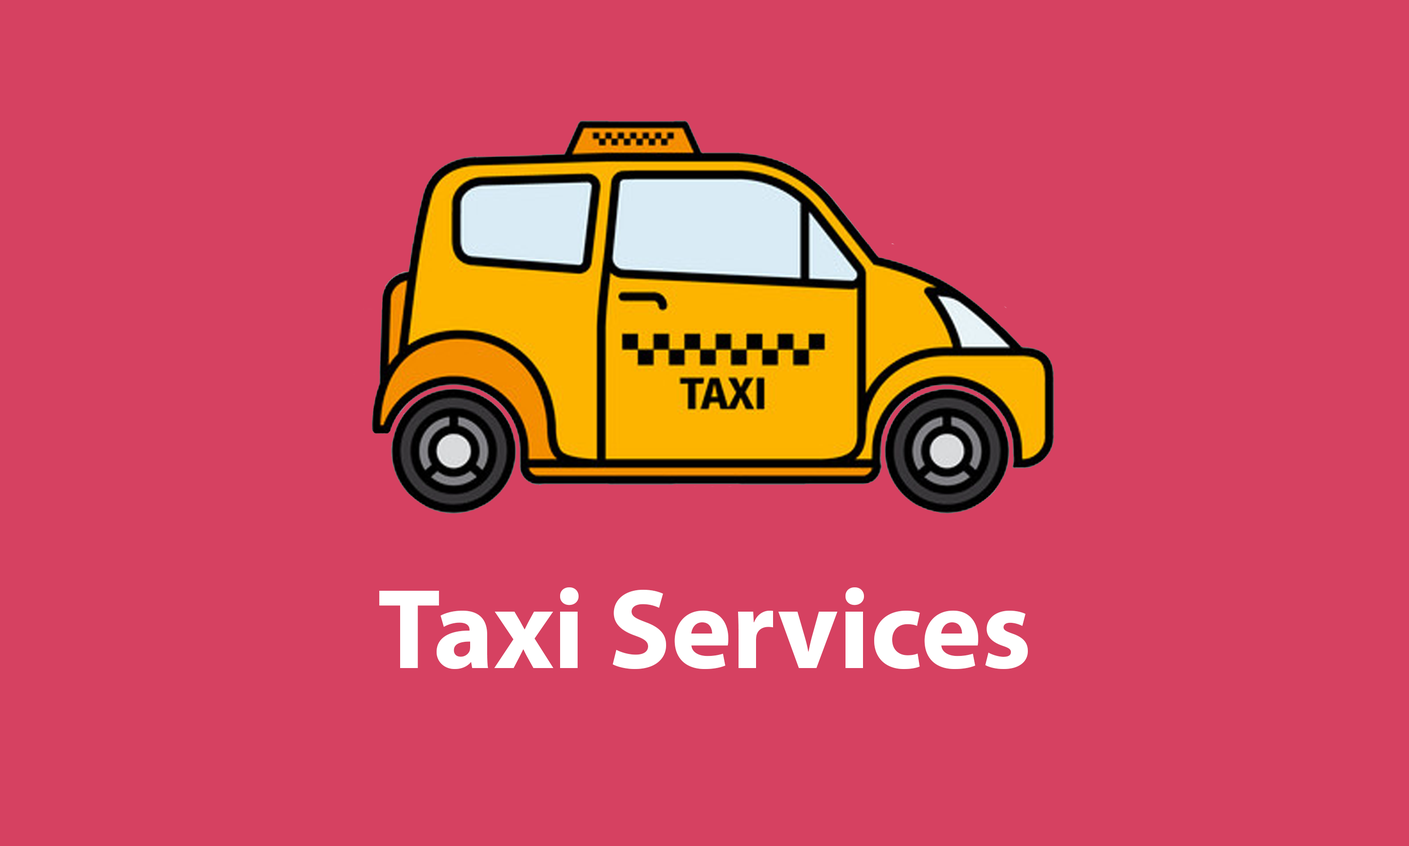
<style>
.page{position:relative;width:1409px;height:846px;background:#d64161}
.page>*{position:absolute;margin:0}
.t1{font:115px "MyriadPro-Bold";color:#ffffff}
</style>
<div class="page">
<p class="t1" style="left:379px;top:587px;width:649px;height:83px">Taxi Services</p>
</div>
